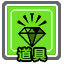
<style>
.page{position:relative;width:64px;height:64px;background:#ffffff}
.page>*{position:absolute;margin:0}
.t1{font:13.3px "FZLTHProGlobal-Demibold";letter-spacing:0.06em;color:#6ee224;scale:1.05 1}
</style>
<div class="page">
<p class="t1" style="left:18px;top:48px;width:28px;height:13px">道具</p>
</div>
